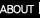
<style>
.page{position:relative;width:40px;height:18px;background:#000000}
.page>*{position:absolute;margin:0}
.t1{font:10px "S-CoreDream-1Thin";color:#ffffff;text-transform:uppercase;font-weight:bold}
</style>
<div class="page">
<p class="t1" style="left:0px;top:5px;width:34px;height:9px">ABOUT</p>
</div>
